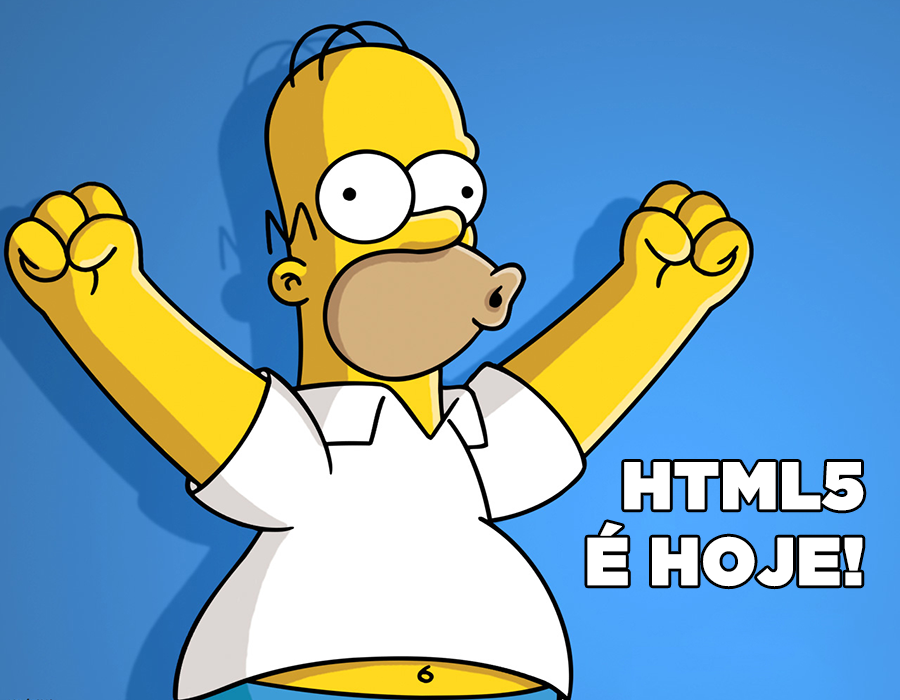
<style>
.page{position:relative;width:900px;height:700px}
.page>*{position:absolute;margin:0}
.t1{font:66.7px/75.8px "GothamUltra";color:#ffffff;font-weight:bold}
</style>
<div class="page">
<p class="t1" style="left:587px;top:462px;width:277px;height:125px;text-align:right">HTML5<br>É HOJE!</p>
</div>
